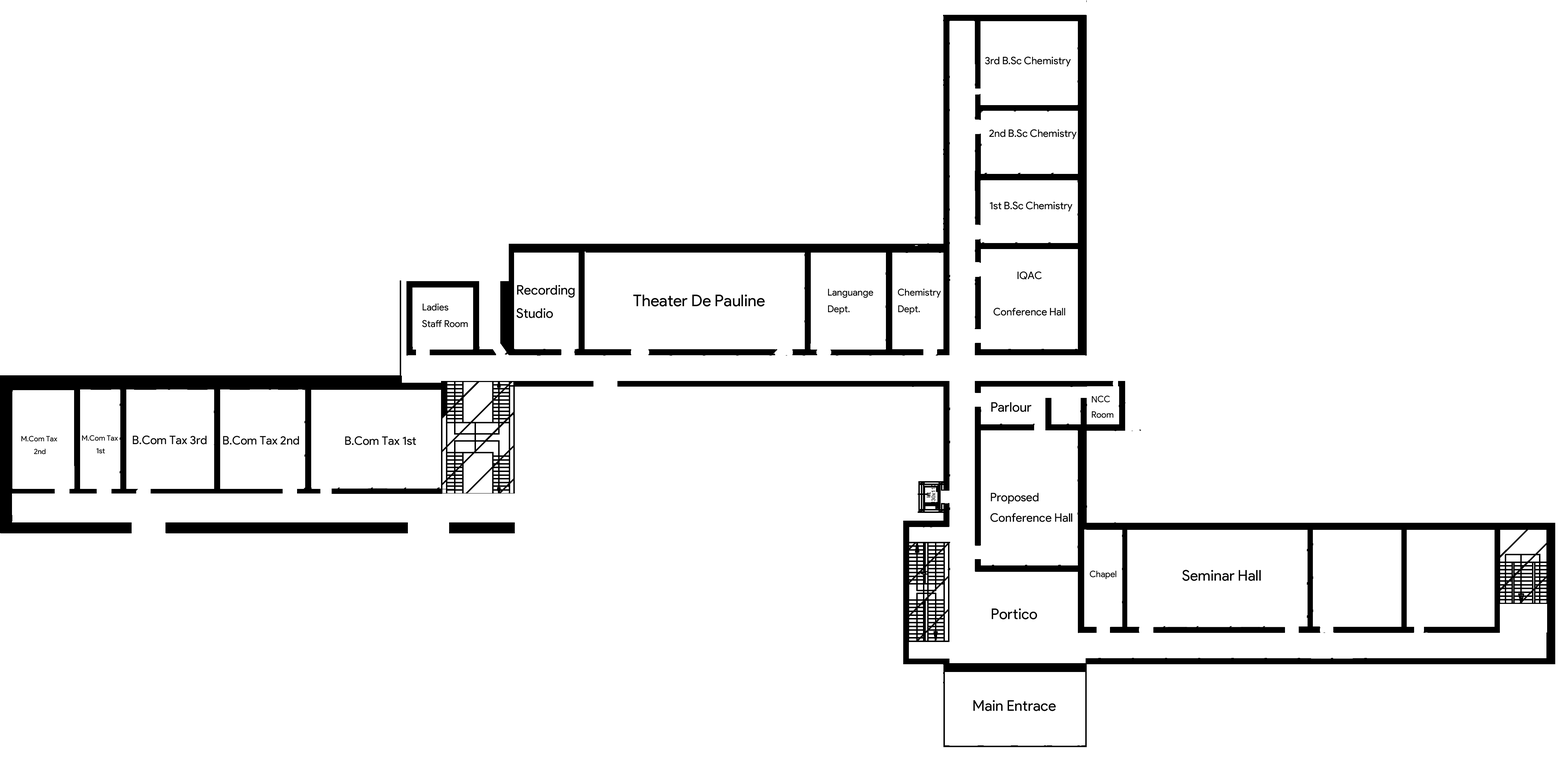
<style>
.page{position:relative;width:1563px;height:763px;background:#ffffff}
.page>*{position:absolute;margin:0}
.t1{font:10.3px "ProductSans-Regular";color:#000000}
.t2{font:13.2px "ProductSans-Regular";color:#000000}
.t3{font:9.5px "ProductSans-Regular";color:#000000}
.t4{font:16.2px "ProductSans-Regular";color:#000000}
.t5{font:8.8px "ProductSans-Regular";color:#000000}
.t6{font:7.3px "ProductSans-Regular";color:#000000}
.t7{font:11.8px "ProductSans-Regular";color:#000000}
.t8{font:14.7px "ProductSans-Regular";color:#000000}
</style>
<div class="page">
<p class="t1" style="left:985px;top:56px;width:86px;height:11px">3rd B.Sc Chemistry</p>
<p class="t1" style="left:989px;top:129px;width:88px;height:10px">2nd B.Sc Chemistry</p>
<p class="t1" style="left:990px;top:201px;width:82px;height:11px">1st B.Sc Chemistry</p>
<p class="t1" style="left:993px;top:271px;width:72px;height:45px;text-align:center">IQAC<br><br>Conference Hall</p>
<p class="t2" style="left:516px;top:285px;width:59px;height:33px">Recording<br>Studio</p>
<p class="t3" style="left:828px;top:289px;width:45px;height:25px">Languange<br>Dept.</p>
<p class="t3" style="left:898px;top:289px;width:43px;height:25px">Chemistry<br>Dept.</p>
<p class="t3" style="left:422px;top:303px;width:46px;height:24px">Ladies<br>Staff Room</p>
<p class="t4" style="left:633px;top:295px;width:132px;height:12px">Theater De Pauline</p>
<p class="t5" style="left:1091px;top:395px;width:22px;height:23px">NCC <br>Room</p>
<p class="t2" style="left:991px;top:402px;width:40px;height:10px">Parlour</p>
<p class="t6" style="left:21px;top:436px;width:36px;height:18px;text-align:center">M.Com Tax <br>2nd</p>
<p class="t6" style="left:82px;top:435px;width:36px;height:19px;text-align:center">M.Com Tax <br>1st</p>
<p class="t7" style="left:133px;top:435px;width:74px;height:9px">B.Com Tax 3rd</p>
<p class="t7" style="left:223px;top:436px;width:76px;height:9px">B.Com Tax 2nd</p>
<p class="t7" style="left:345px;top:436px;width:71px;height:9px">B.Com Tax 1st</p>
<p class="t7" style="left:990px;top:493px;width:82px;height:29px">Proposed <br>Conference Hall</p>
<p class="t8" style="left:1182px;top:570px;width:79px;height:11px">Seminar Hall</p>
<p class="t5" style="left:1090px;top:570px;width:26px;height:9px">Chapel</p>
<p class="t8" style="left:992px;top:608px;width:45px;height:11px">Portico</p>
<p class="t8" style="left:973px;top:700px;width:83px;height:11px">Main Entrace</p>
</div>
